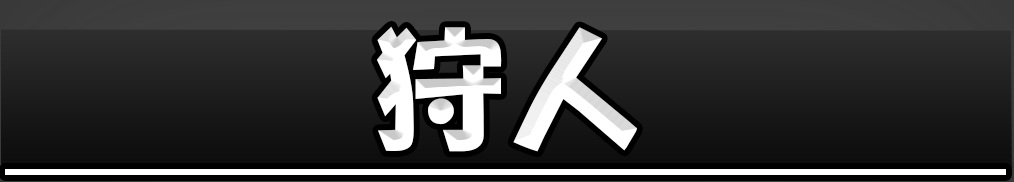
<style>
.page{position:relative;width:1014px;height:182px}
.page>*{position:absolute;margin:0}
.t1{font:130.2px "HGPSoeiKakupoptai";letter-spacing:0.05em;color:#ffffff}
</style>
<div class="page">
<p class="t1" style="left:377px;top:26px;width:260px;height:126px">狩人</p>
</div>
